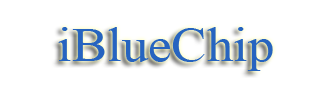
<style>
.page{position:relative;width:331px;height:94px;background:#ffffff}
.page>*{position:absolute;margin:0}
.t1{font:48px "TimesNewRomanPSMT";color:#2664c0;scale:1.1 1}
</style>
<div class="page">
<p class="t1" style="left:58px;top:27px;width:215px;height:44px">iBlueChip</p>
</div>
